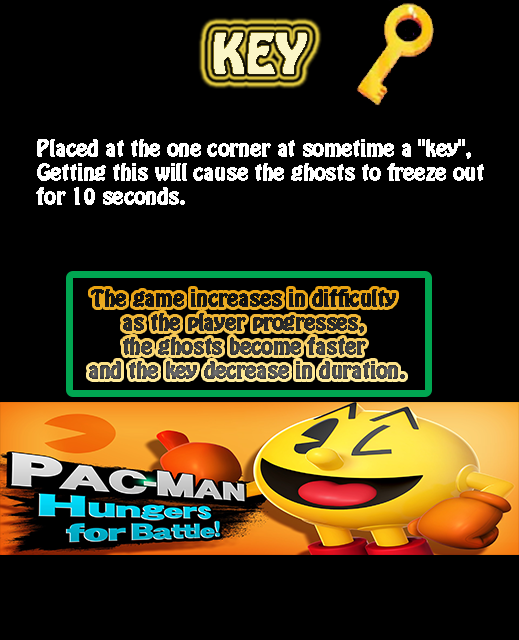
<style>
.page{position:relative;width:519px;height:640px;background:#000000}
.page>*{position:absolute;margin:0}
.t1{font:48px "HoboStd";color:#fbf6c7;font-weight:bold}
.t2{font:20px "HoboStd";color:#ffffff;font-weight:bold}
.t3{font:20px "HoboStd";font-weight:bold}
</style>
<div class="page">
<p class="t1" style="left:214px;top:33px;width:93px;height:41px">KEY</p>
<p class="t2" style="left:36px;top:139px;width:448px;height:66px">Placed at the one corner at sometime a "key", <br>Getting this will cause the ghosts to freeze out <br>for 10 seconds.</p>
<p class="t3" style="left:89px;top:289px;width:316px;height:90px;text-align:center">The game increases in difficulty <br>as the player progresses, <br>the ghosts become faster <br>and the key decrease in duration.</p>
</div>
